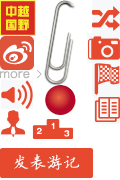
<style>
.page{position:relative;width:120px;height:180px;background:#ffffff}
.page>*{position:absolute;margin:0}
.t1{font:12px "HiraginoSansGB-W3";color:#b5b5b5}
.t2{font:16px "FZYBKSJW--GB1-0";letter-spacing:0.06em;color:#ffffff}
</style>
<div class="page">
<p class="t1" style="left:0px;top:71px;width:30px;height:8px">more</p>
<p class="t2" style="left:14px;top:154px;width:66px;height:16px">发表游记</p>
</div>
